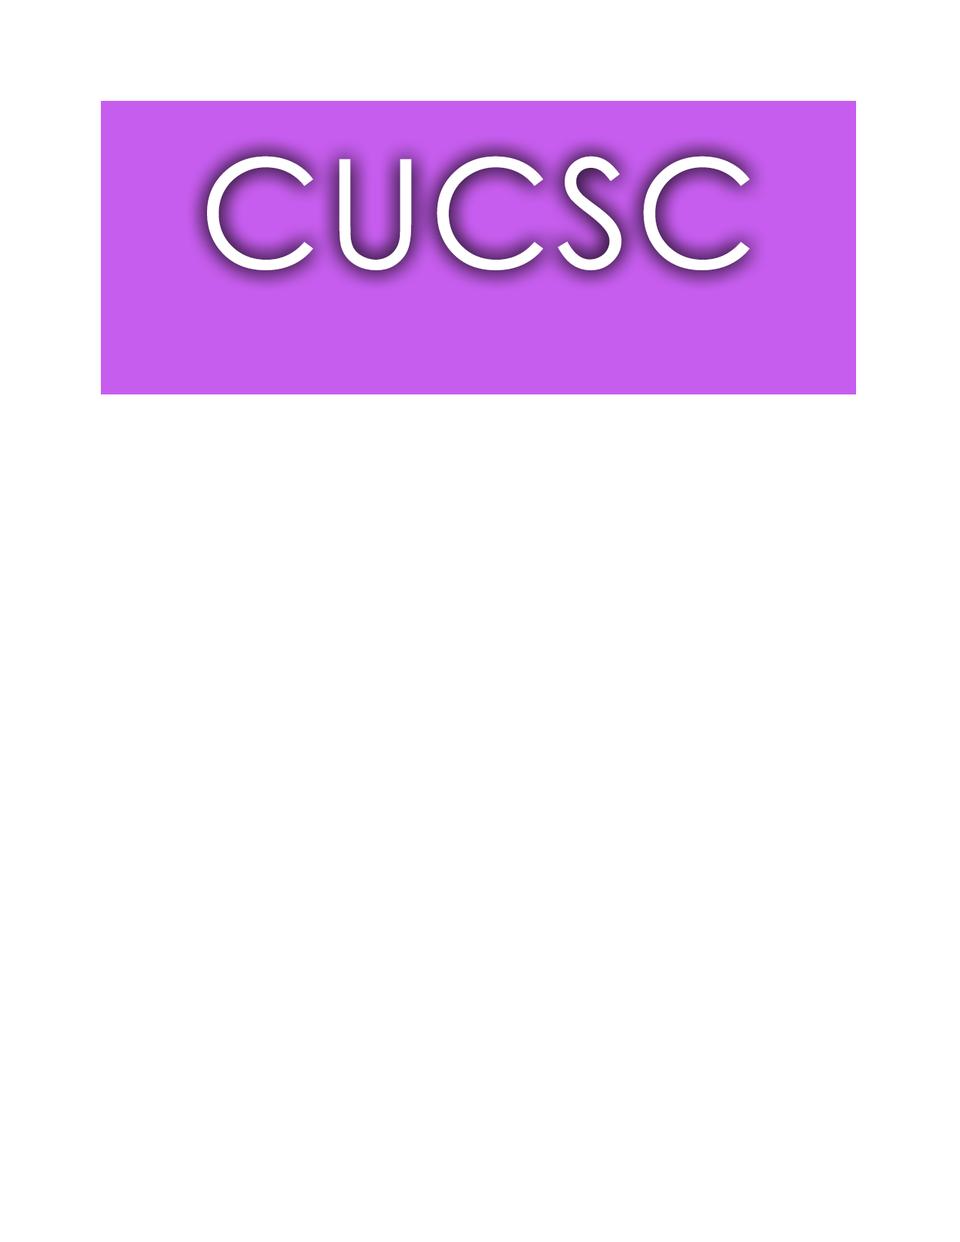
<style>
.page{position:relative;width:960px;height:1242px;background:#ffffff}
.page>*{position:absolute;margin:0}
.t1{font:150.6px "CenturyGothic";letter-spacing:0.03em;color:#ffffff}
</style>
<div class="page">
<p class="t1" style="left:207px;top:156px;width:543px;height:114px">CUCSC</p>
</div>
